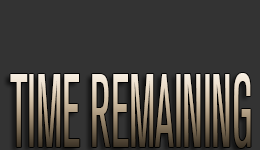
<style>
.page{position:relative;width:260px;height:150px;background:#333333}
.page>*{position:absolute;margin:0}
.t1{font:103.4px "AeonSettings-Regular";scale:0.45 1}
</style>
<div class="page">
<p class="t1" style="left:10px;top:73px;width:241px;height:75px">TIME REMAINING</p>
</div>
